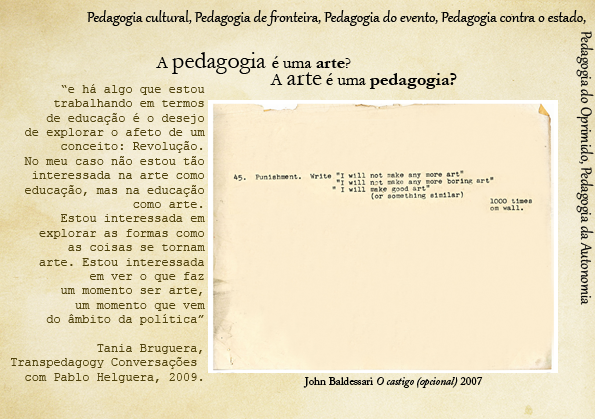
<style>
.page{position:relative;width:595px;height:419px}
.page>*{position:absolute;margin:0}
.t1{font:18px "Gabriola";color:#000000}
.t2{font:24px "Garamond";color:#000000}
.t3{font:17px "Garamond";color:#000000}
.t4{font:18px "Garamond-Bold";color:#000000}
.t5{font:16.5px "Garamond";color:#000000}
.t6{font:12px "CourierNewPSMT";color:#4e410b}
.t7{font:11px "ACaslonPro-Italic";color:#000000}
.t8{font:11px "ACaslonPro-Regular";color:#000000}
</style>
<div class="page">
<p class="t1" style="left:87px;top:10px;width:499px;height:16px">Pedagogia cultural, Pedagogia de fronteira, Pedagogia do evento, Pedagogia contra o estado,</p>
<p class="t1" style="left:576px;top:31px;width:18px;height:274px;rotate:90deg">Pedagogia do Oprimido, Pedagogia da Autonomia</p>
<p class="t2" style="left:156px;top:52px;width:195px;height:22px"><span class="t3">A </span>pedagogia <span class="t3">é uma </span><span class="t4">arte</span><span class="t5">?</span></p>
<p class="t4" style="left:270px;top:72px;width:187px;height:17px"><span class="t3">A </span><span class="t2">arte</span><span class="t3"> é uma </span>pedagogia?</p>
<p class="t6" style="left:11px;top:84px;width:194px;height:299px;text-align:right">“e há algo que estou<br>trabalhando em termos<br>de educação é o desejo<br>de explorar o afeto de um<br>conceito: Revolução.<br>No meu caso não estou tão<br>interessada na arte como<br>educação, mas na educação<br>como arte.<br>Estou interessada em<br>explorar as formas como<br>as coisas se tornam<br>arte. Estou interessada<br>em ver o que faz<br>um momento ser arte,<br>um momento que vem<br>do âmbito da política”<br>      <br>Tania Bruguera,<br>Transpedagogy Conversações <br>com Pablo Helguera, 2009.</p>
<p class="t7" style="left:303px;top:377px;width:180px;height:11px"><span class="t8">John Baldessari </span>O castigo (opcional)<span class="t8"> 2007</span></p>
</div>
